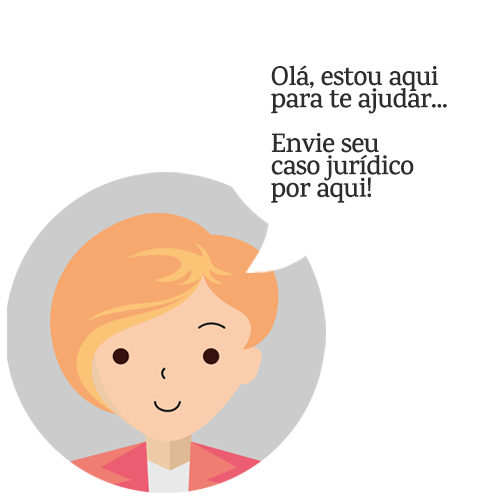
<style>
.page{position:relative;width:500px;height:500px;background:#ffffff}
.page>*{position:absolute;margin:0}
.t1{font:27.1px/22.3px "Karma-Semibold";letter-spacing:-0.03em;color:#2e2c2c}
</style>
<div class="page">
<p class="t1" style="left:271px;top:65px;width:176px;height:138px">Olá, estou aqui <br>para te ajudar...<br><br>Envie seu <br>caso jurídico <br>por aqui!</p>
</div>
